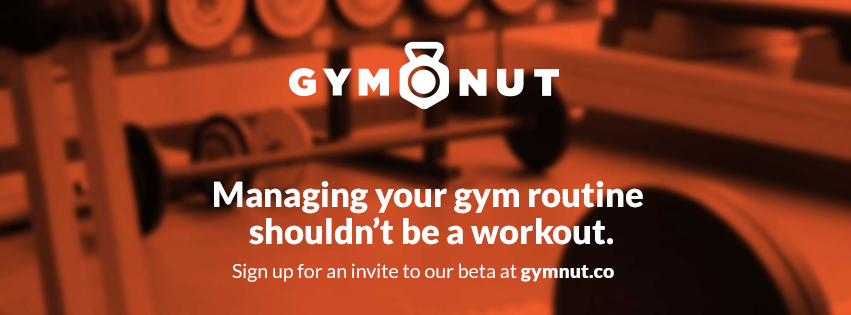
<style>
.page{position:relative;width:851px;height:315px}
.page>*{position:absolute;margin:0}
.t1{font:34.5px/31.2px "Lato-Black";color:#ffffff}
.t2{font:19.5px "Lato-Regular";color:#ffffff}
.t3{font:19.5px "Lato-Black";color:#ffffff}
</style>
<div class="page">
<p class="t1" style="left:214px;top:181px;width:429px;height:64px;text-align:center">Managing your gym routine <br>shouldn’t be a workout.</p>
<p class="t2" style="left:232px;top:263px;width:382px;height:19px">Sign up for an invite to our beta at <span class="t3">gymnut.co</span></p>
</div>
